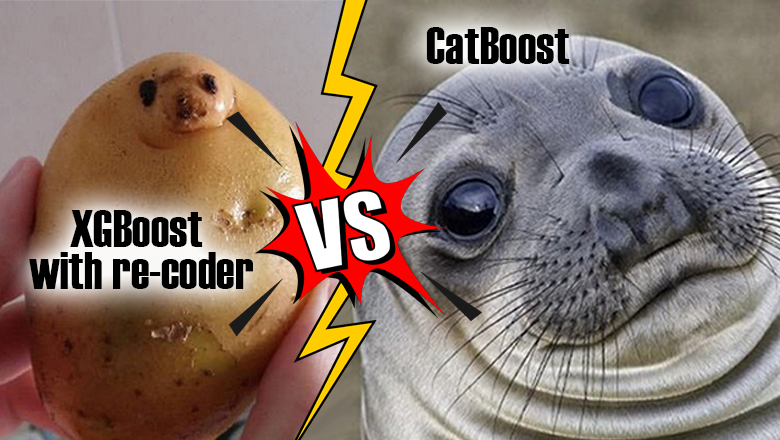
<style>
.page{position:relative;width:780px;height:440px}
.page>*{position:absolute;margin:0}
.t1{font:52px "Haettenschweiler";color:#000000}
.t2{font:52px/42px "Haettenschweiler";color:#000000}
</style>
<div class="page">
<p class="t1" style="left:426px;top:27px;width:144px;height:37px">CatBoost</p>
<p class="t2" style="left:29px;top:210px;width:224px;height:79px;text-align:center">XGBoost <br>with re-coder</p>
</div>
